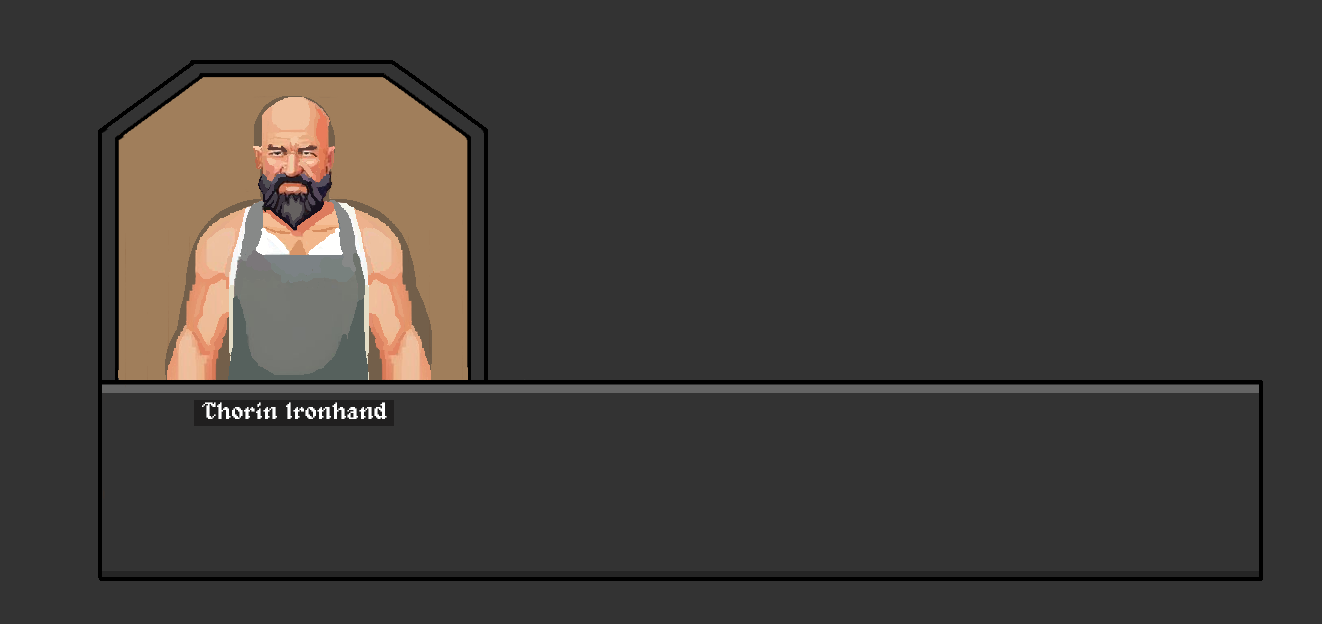
<style>
.page{position:relative;width:1322px;height:624px;background:#333333}
.page>*{position:absolute;margin:0}
.t1{font:24px "Alagard";color:#ffffff}
</style>
<div class="page">
<p class="t1" style="left:202px;top:402px;width:185px;height:17px">Thorin Ironhand</p>
</div>
